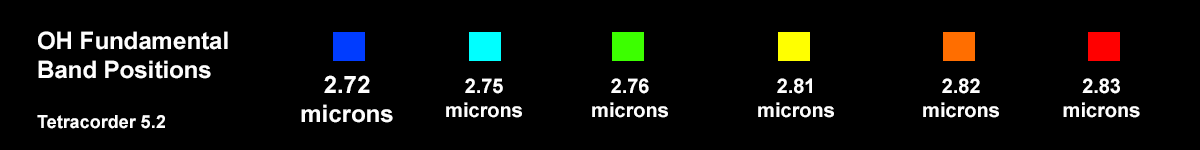
<style>
.page{position:relative;width:1200px;height:150px;background:#000000}
.page>*{position:absolute;margin:0}
.t1{font:24px "Arial-BoldMT";color:#fefefe}
.t2{font:18px "Arial-BoldMT";color:#fefefe}
.t3{font:20px "Arial-BoldMT";color:#fefefe}
</style>
<div class="page">
<p class="t1" style="left:37px;top:31px;width:191px;height:98px">OH Fundamental<br>Band Positions<br><br><span class="t2">Tetracorder 5.2</span></p>
<p class="t1" style="left:301px;top:75px;width:92px;height:48px;text-align:center">2.72<br>microns</p>
<p class="t3" style="left:446px;top:78px;width:76px;height:40px;text-align:center">2.75<br>microns</p>
<p class="t3" style="left:592px;top:78px;width:76px;height:40px;text-align:center">2.76<br>microns</p>
<p class="t3" style="left:758px;top:78px;width:76px;height:40px;text-align:center">2.81<br>microns</p>
<p class="t3" style="left:923px;top:78px;width:76px;height:40px;text-align:center">2.82<br>microns</p>
<p class="t3" style="left:1063px;top:78px;width:77px;height:40px;text-align:center">2.83<br>microns</p>
</div>
